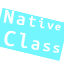
<style>
.page{position:relative;width:64px;height:64px;background:#ffffff}
.page>*{position:absolute;margin:0}
.t1{font:20.3px "UbuntuMono-Regular";letter-spacing:0.1em;color:#ffffff;font-weight:bold}
.t2{font:18.5px "UbuntuMono-Regular";letter-spacing:0.1em;color:#ffffff;font-weight:bold}
.t3{font:16.3px "UbuntuMono-Regular";letter-spacing:0.1em;color:#ffffff;font-weight:bold}
.t4{font:14.5px "UbuntuMono-Regular";letter-spacing:0.1em;color:#ffffff;font-weight:bold}
.t5{font:12.7px "UbuntuMono-Regular";letter-spacing:0.1em;color:#ffffff;font-weight:bold}
.t6{font:10.9px "UbuntuMono-Regular";letter-spacing:0.1em;color:#ffffff;font-weight:bold}
.t7{font:23.2px "UbuntuMono-Regular";letter-spacing:0.1em;color:#ffffff;font-weight:bold}
.t8{font:20.8px "UbuntuMono-Regular";letter-spacing:0.1em;color:#ffffff;font-weight:bold}
.t9{font:18.7px "UbuntuMono-Regular";letter-spacing:0.1em;color:#ffffff;font-weight:bold}
.t10{font:16.6px "UbuntuMono-Regular";letter-spacing:0.1em;color:#ffffff;font-weight:bold}
.t11{font:14.6px "UbuntuMono-Regular";letter-spacing:0.1em;color:#ffffff;font-weight:bold}
</style>
<div class="page">
<p class="t1" style="left:3px;top:9px;width:58px;height:22px;rotate:8deg">N<span class="t2">a</span><span class="t3">t</span><span class="t4">i</span><span class="t5">v</span><span class="t6">e</span></p>
<p class="t7" style="left:4px;top:31px;width:56px;height:22px;rotate:8deg">C<span class="t8">l</span><span class="t9">a</span><span class="t10">s</span><span class="t11">s</span></p>
</div>
